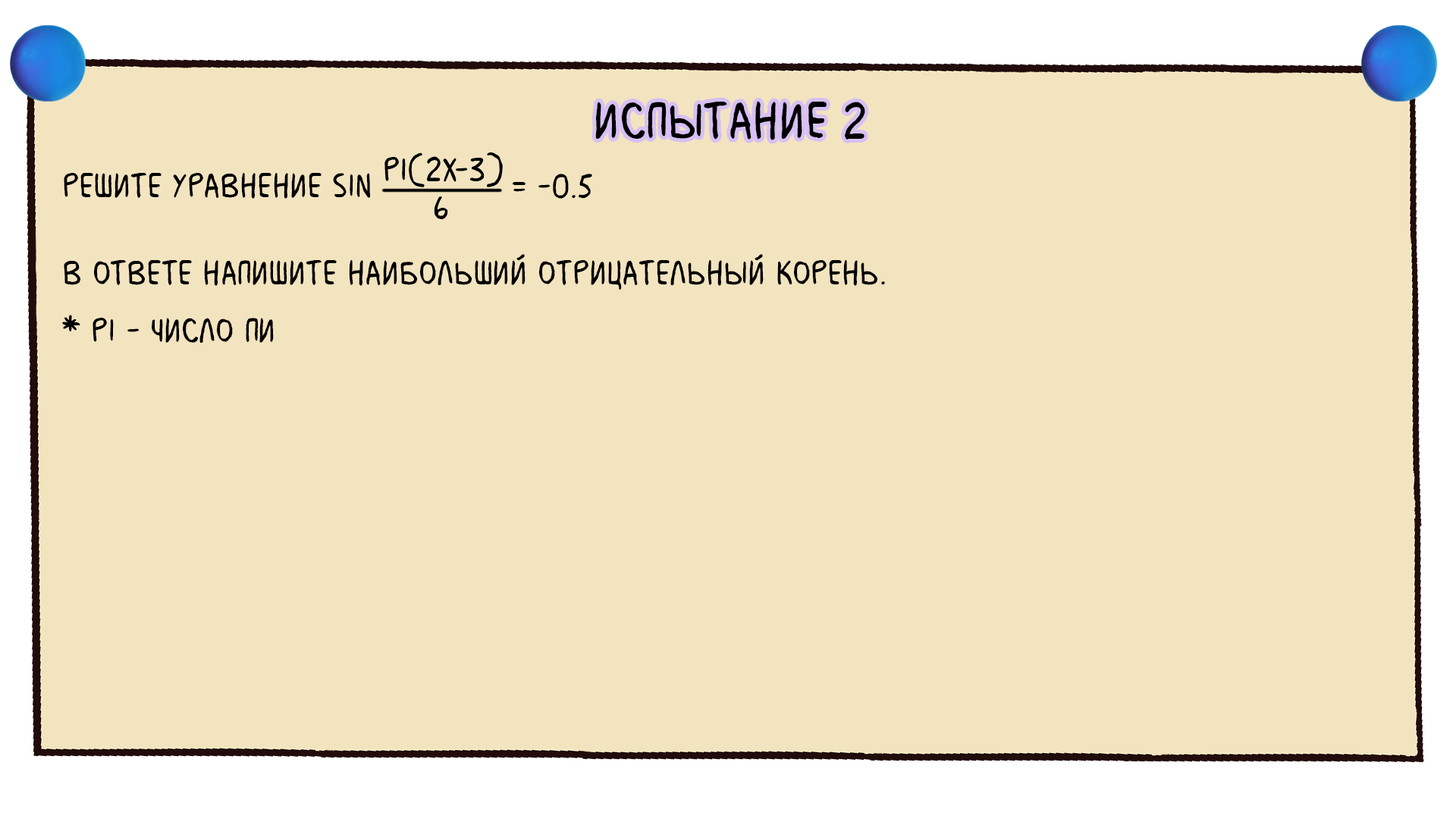
<style>
.page{position:relative;width:1456px;height:819px;background:#f3e4c0}
.page>*{position:absolute;margin:0}
.t1{font:54.6px "MilkMustacheBB";color:#000000}
.t2{font:36.4px "MilkMustacheBB";color:#000000}
</style>
<div class="page">
<p class="t1" style="left:595px;top:101px;width:270px;height:39px">испытание 2</p>
<p class="t2" style="left:64px;top:172px;width:821px;height:118px">решите уравнение sin<br><br>В ответе напишите наибольший отрицательный корень.</p>
<p class="t2" style="left:513px;top:174px;width:79px;height:25px">= -0.5</p>
<p class="t2" style="left:62px;top:315px;width:212px;height:29px">* pi - число пи</p>
</div>
